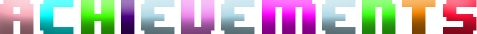
<style>
.page{position:relative;width:477px;height:34px;background:#ffffff}
.page>*{position:absolute;margin:0}
.t1{font:40.2px "8BITWONDERNominal"}
</style>
<div class="page">
<p class="t1" style="left:0px;top:0px;width:477px;height:34px">ACHIEVEMENTS</p>
</div>
